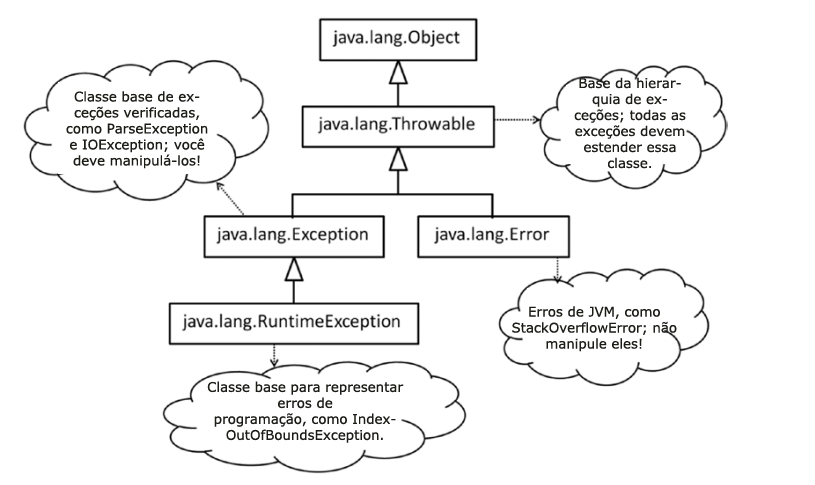
<style>
.page{position:relative;width:815px;height:485px;background:#ffffff}
.page>*{position:absolute;margin:0}
.t1{font:13.3px "Verdana";color:#1d1d18}
</style>
<div class="page">
<p class="t1" style="left:574px;top:77px;width:112px;height:92px;text-align:center">Base da hierarquia de exceções; todas as <br>exceções devem estender essa classe.</p>
<p class="t1" style="left:66px;top:91px;width:142px;height:78px;text-align:center">Classe base de exceções verificadas, como ParseException e IOException; você deve manipulá-los!</p>
<p class="t1" style="left:512px;top:306px;width:165px;height:46px;text-align:center">Erros de JVM, como StackOverflowError; não <br>manipule eles!</p>
<p class="t1" style="left:207px;top:381px;width:197px;height:62px;text-align:center">Classe base para representar erros de <br>programação, como IndexOutOfBoundsException.</p>
</div>
